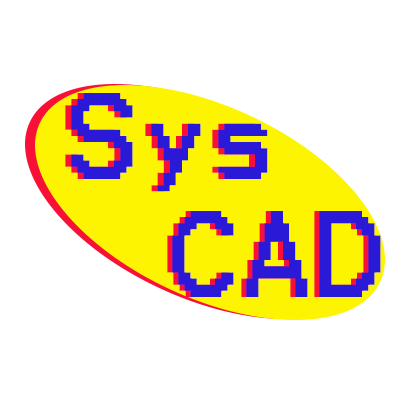
<style>
.page{position:relative;width:400px;height:400px;background:#ffffff}
.page>*{position:absolute;margin:0}
.t1{font:98.4px "Terminal";color:#2b19d8}
</style>
<div class="page">
<p class="t1" style="left:65px;top:93px;width:197px;height:99px">Sys</p>
<p class="t1" style="left:71px;top:93px;width:197px;height:99px">Sys</p>
<p class="t1" style="left:167px;top:211px;width:209px;height:86px">CAD</p>
<p class="t1" style="left:172px;top:211px;width:209px;height:86px">CAD</p>
</div>
